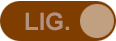
<style>
.page{position:relative;width:116px;height:41px;background:#803d00}
.page>*{position:absolute;margin:0}
.t1{font:24px "Arial-BoldMT";color:#b2917e}
</style>
<div class="page">
<p class="t1" style="left:25px;top:12px;width:44px;height:19px">LIG.</p>
</div>
